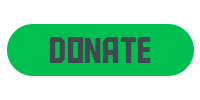
<style>
.page{position:relative;width:200px;height:100px;background:#ffffff}
.page>*{position:absolute;margin:0}
.t1{font:36px "AldotheApache";color:#414950}
</style>
<div class="page">
<p class="t1" style="left:49px;top:37px;width:102px;height:26px">DONATE</p>
</div>
